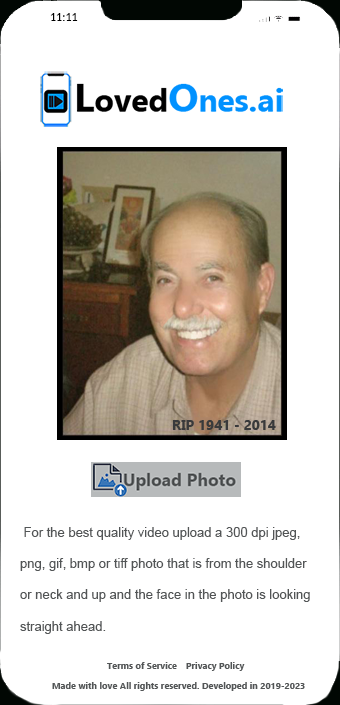
<style>
.page{position:relative;width:340px;height:705px;background:#ffffff}
.page>*{position:absolute;margin:0}
.t1{font:12px "Carlito";color:#000000}
.t2{font:13px "ArialMT";color:#525556}
</style>
<div class="page">
<p class="t1" style="left:50px;top:13px;width:28px;height:8px">11:11</p>
<p class="t2" style="left:20px;top:527px;width:290px;height:107px">For the best quality video upload a 300 dpi jpeg, <br><br>png, gif, bmp or tiff photo that is from the shoulder<br><br>or neck and up and the face in the photo is looking<br><br>straight ahead.</p>
</div>
